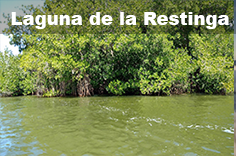
<style>
.page{position:relative;width:236px;height:156px}
.page>*{position:absolute;margin:0}
.t1{font:18px "Arial-Black";color:#ffffff}
</style>
<div class="page">
<p class="t1" style="left:11px;top:12px;width:218px;height:17px">Laguna de la Restinga</p>
</div>
